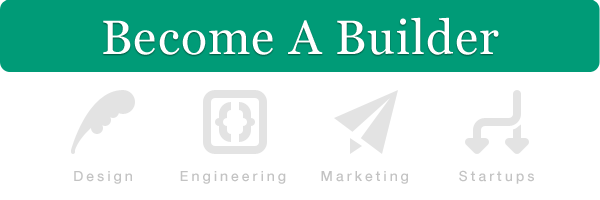
<style>
.page{position:relative;width:600px;height:200px;background:#ffffff}
.page>*{position:absolute;margin:0}
.t1{font:48px "Georgia";letter-spacing:0.025em;color:#ffffff}
.t2{font:14px "HelveticaNeue-Medium";letter-spacing:0.21em;color:#c3c3c3}
</style>
<div class="page">
<p class="t1" style="left:103px;top:17px;width:396px;height:38px">Become A Builder</p>
<p class="t2" style="left:74px;top:171px;width:58px;height:13px">Design</p>
<p class="t2" style="left:180px;top:171px;width:106px;height:13px">Engineering</p>
<p class="t2" style="left:321px;top:171px;width:87px;height:13px">Marketing</p>
<p class="t2" style="left:459px;top:170px;width:75px;height:14px">Startups</p>
</div>
